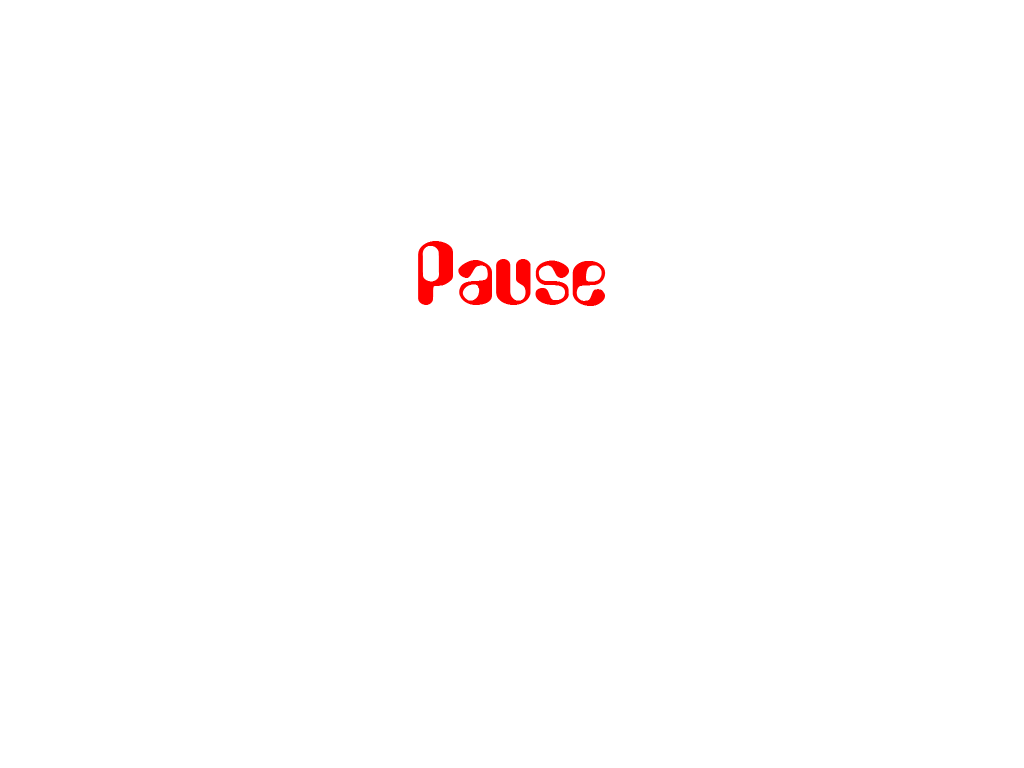
<style>
.page{position:relative;width:1024px;height:768px;background:#ffffff}
.page>*{position:absolute;margin:0}
.t1{font:80px "Asimov";color:#ff0000}
</style>
<div class="page">
<p class="t1" style="left:418px;top:241px;width:188px;height:65px">Pause</p>
</div>
